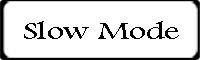
<style>
.page{position:relative;width:200px;height:60px;background:#ffffff}
.page>*{position:absolute;margin:0}
.t1{font:26px "FootlightMTLight";color:#010101;scale:1.33 1}
</style>
<div class="page">
<p class="t1" style="left:24px;top:21px;width:155px;height:18px">Slow Mode</p>
</div>
